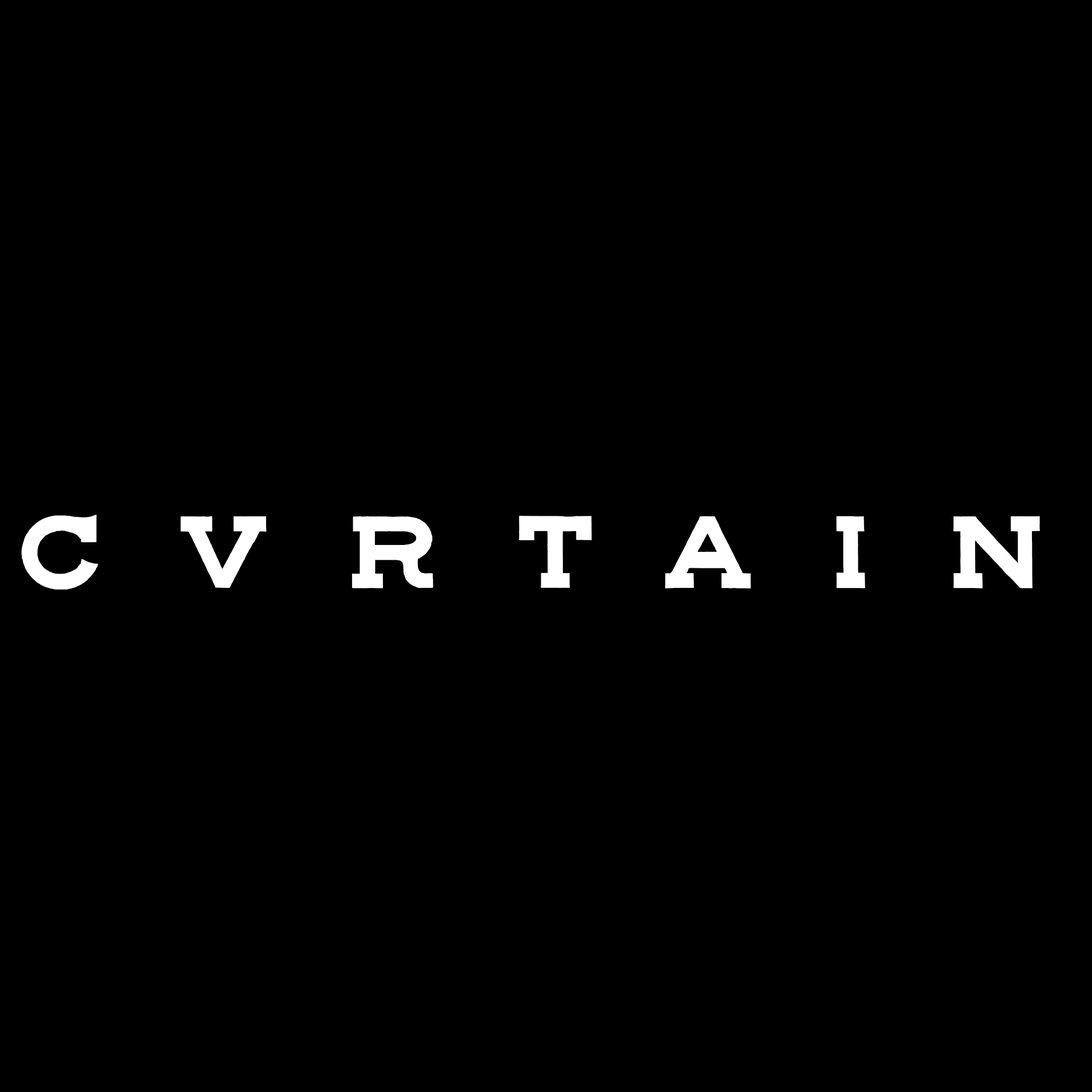
<style>
.page{position:relative;width:1092px;height:1092px;background:#000000}
.page>*{position:absolute;margin:0}
.t1{font:113.5px "GresleyWF";letter-spacing:0.645em;color:#ffffff}
</style>
<div class="page">
<p class="t1" style="left:21px;top:515px;width:1019px;height:75px">CVRTAIN</p>
</div>
